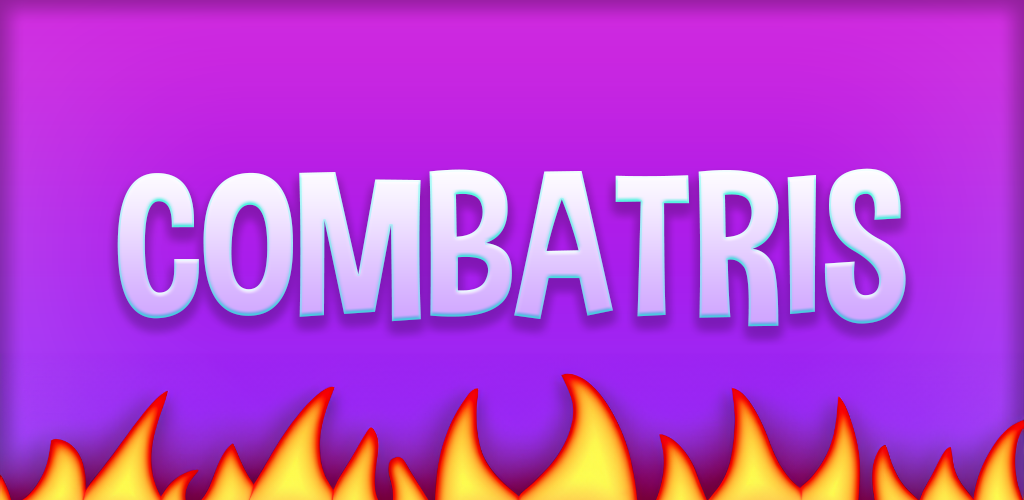
<style>
.page{position:relative;width:1024px;height:500px}
.page>*{position:absolute;margin:0}
.t1{font:203px "DimboRegular"}
</style>
<div class="page">
<p class="t1" style="left:117px;top:168px;width:789px;height:159px">COMBATRIS</p>
</div>
